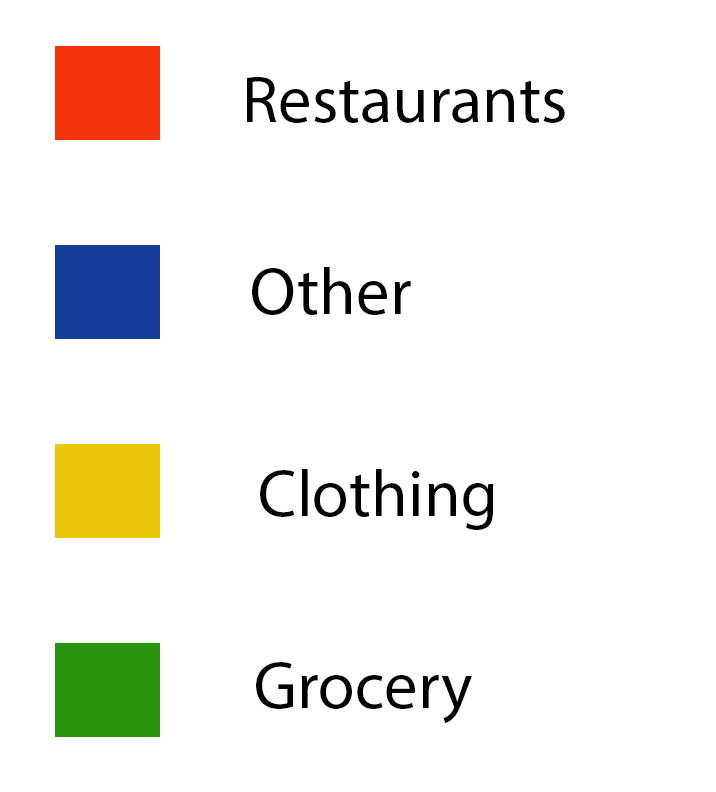
<style>
.page{position:relative;width:716px;height:792px;background:#ffffff}
.page>*{position:absolute;margin:0}
.t1{font:66.7px "MyriadPro-Regular";color:#000000}
</style>
<div class="page">
<p class="t1" style="left:247px;top:77px;width:318px;height:46px">Restaurants</p>
<p class="t1" style="left:252px;top:267px;width:159px;height:48px">Other</p>
<p class="t1" style="left:260px;top:469px;width:234px;height:61px">Clothing</p>
<p class="t1" style="left:256px;top:662px;width:216px;height:61px">Grocery</p>
</div>
